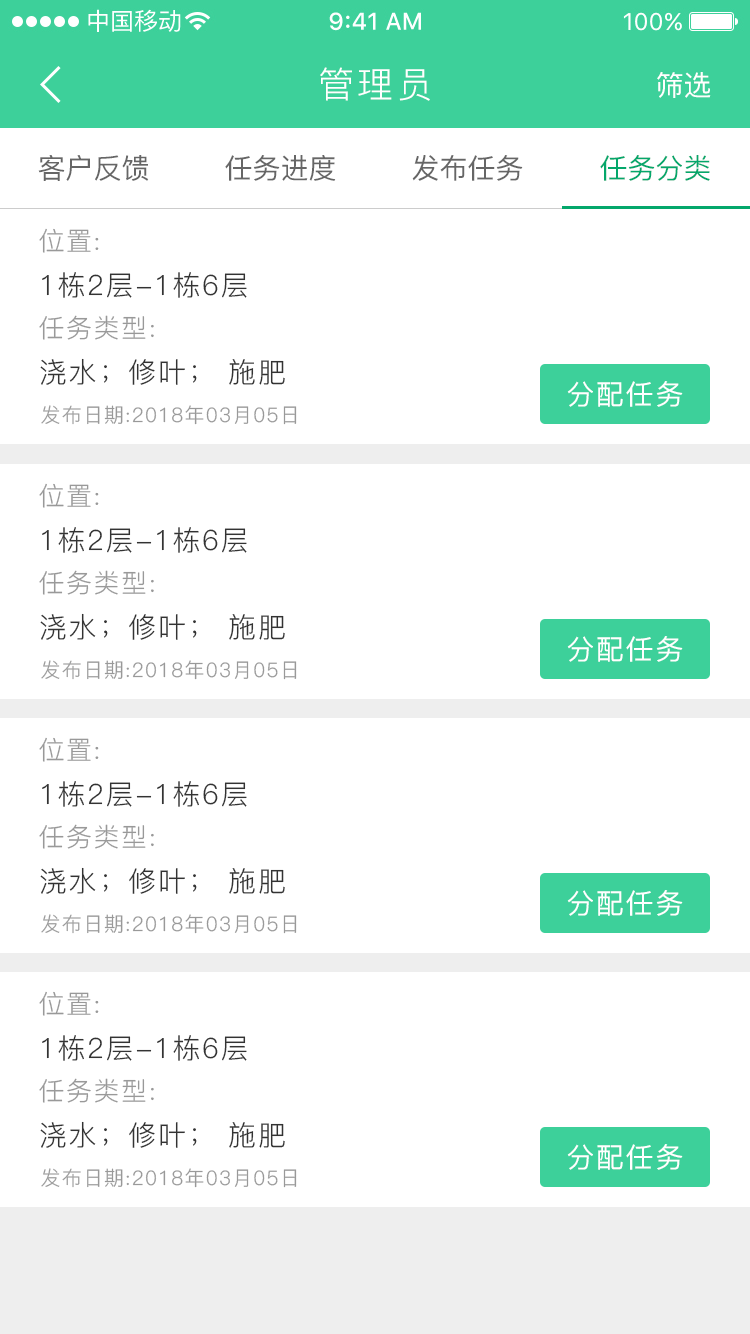
<style>
.page{position:relative;width:750px;height:1334px;background:#ffffff}
.page>*{position:absolute;margin:0}
.t1{font:36px "PingFang-SC-Regular";letter-spacing:0.1em;color:#ffffff}
.t2{font:28px "PingFang-SC-Medium";color:#ffffff}
.t3{font:28px "PingFang-SC-Medium";color:#666666}
.t4{font:28px "PingFang-SC-Medium";color:#04a76b}
.t5{font:26px "PingFang-SC-Regular";letter-spacing:0.06em;color:#999999}
.t6{font:28px "PingFang-SC-Regular";letter-spacing:0.06em;color:#333333}
.t7{font:28px "PingFang-SC-Medium";letter-spacing:0.06em;color:#ffffff}
.t8{font:20px "PingFang-SC-Regular";letter-spacing:0.06em;color:#999999}
</style>
<div class="page">
<p class="t1" style="left:320px;top:67px;width:110px;height:34px">管理员</p>
<p class="t2" style="left:657px;top:72px;width:54px;height:26px">筛选</p>
<p class="t3" style="left:38px;top:155px;width:111px;height:26px">客户反馈</p>
<p class="t3" style="left:225px;top:155px;width:111px;height:26px">任务进度</p>
<p class="t3" style="left:412px;top:155px;width:111px;height:26px">发布任务</p>
<p class="t4" style="left:600px;top:155px;width:110px;height:26px">任务分类</p>
<p class="t5" style="left:39px;top:228px;width:60px;height:25px">位置:</p>
<p class="t6" style="left:42px;top:272px;width:205px;height:26px">1栋2层-1栋6层</p>
<p class="t5" style="left:39px;top:315px;width:115px;height:25px">任务类型:</p>
<p class="t6" style="left:40px;top:358px;width:245px;height:27px">浇水；修叶； 施肥</p>
<p class="t7" style="left:567px;top:381px;width:116px;height:26px">分配任务</p>
<p class="t8" style="left:41px;top:405px;width:256px;height:20px">发布日期:2018年03月05日</p>
<p class="t5" style="left:39px;top:483px;width:60px;height:25px">位置:</p>
<p class="t6" style="left:42px;top:527px;width:205px;height:26px">1栋2层-1栋6层</p>
<p class="t5" style="left:39px;top:570px;width:115px;height:25px">任务类型:</p>
<p class="t6" style="left:40px;top:613px;width:245px;height:27px">浇水；修叶； 施肥</p>
<p class="t7" style="left:567px;top:636px;width:116px;height:26px">分配任务</p>
<p class="t8" style="left:41px;top:660px;width:256px;height:20px">发布日期:2018年03月05日</p>
<p class="t5" style="left:39px;top:737px;width:60px;height:25px">位置:</p>
<p class="t6" style="left:42px;top:781px;width:205px;height:26px">1栋2层-1栋6层</p>
<p class="t5" style="left:39px;top:824px;width:115px;height:25px">任务类型:</p>
<p class="t6" style="left:40px;top:867px;width:245px;height:27px">浇水；修叶； 施肥</p>
<p class="t7" style="left:567px;top:890px;width:116px;height:26px">分配任务</p>
<p class="t8" style="left:41px;top:914px;width:256px;height:20px">发布日期:2018年03月05日</p>
<p class="t5" style="left:39px;top:991px;width:60px;height:25px">位置:</p>
<p class="t6" style="left:42px;top:1035px;width:205px;height:26px">1栋2层-1栋6层</p>
<p class="t5" style="left:39px;top:1078px;width:115px;height:25px">任务类型:</p>
<p class="t6" style="left:40px;top:1121px;width:245px;height:27px">浇水；修叶； 施肥</p>
<p class="t7" style="left:567px;top:1144px;width:116px;height:26px">分配任务</p>
<p class="t8" style="left:41px;top:1168px;width:256px;height:20px">发布日期:2018年03月05日</p>
</div>
